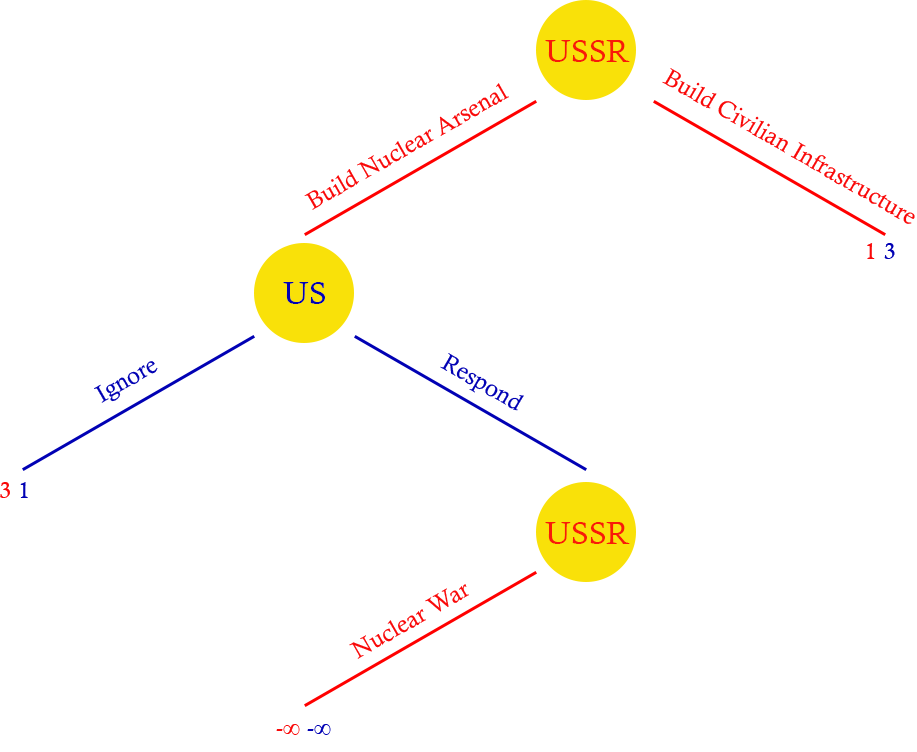
<style>
.page{position:relative;width:917px;height:752px;background:#ffffff}
.page>*{position:absolute;margin:0}
.t1{font:24px "CalistoMT";color:#f90909}
.t2{font:24px "CalistoMT";color:#ffffff}
.t3{font:24px "CalistoMT";color:#0101b4}
</style>
<div class="page">
<p class="t1" style="left:662px;top:68px;width:253px;height:156px;rotate:30deg">Build Civilian Infrastructure</p>
<p class="t1" style="left:304px;top:83px;width:205px;height:127px;rotate:-30deg">Build Nuclear Arsenal</p>
<p class="t1" style="left:867px;top:243px;width:28px;height:20px">1<span class="t2">,</span><span class="t3">3</span></p>
<p class="t3" style="left:440px;top:353px;width:84px;height:58px;rotate:30deg">Respond</p>
<p class="t3" style="left:94px;top:361px;width:64px;height:42px;rotate:-30deg">Ignore</p>
<p class="t1" style="left:0px;top:482px;width:28px;height:20px">3<span class="t2">,</span><span class="t3">1</span></p>
<p class="t1" style="left:349px;top:584px;width:120px;height:75px;rotate:-30deg">Nuclear War</p>
<p class="t1" style="left:276px;top:724px;width:55px;height:16px">-∞<span class="t2">,</span><span class="t3">-∞</span></p>
</div>
